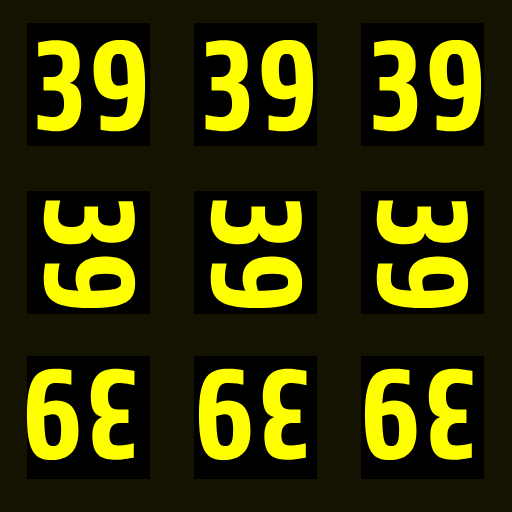
<style>
.page{position:relative;width:512px;height:512px;background:#141301}
.page>*{position:absolute;margin:0}
.t1{font:130px "Share-BoldOSF";color:#ffff00}
</style>
<div class="page">
<p class="t1" style="left:37px;top:39px;width:109px;height:93px">39</p>
<p class="t1" style="left:205px;top:39px;width:109px;height:93px">39</p>
<p class="t1" style="left:373px;top:39px;width:109px;height:93px">39</p>
<p class="t1" style="left:43px;top:200px;width:93px;height:109px;rotate:90deg">39</p>
<p class="t1" style="left:210px;top:200px;width:93px;height:109px;rotate:90deg">39</p>
<p class="t1" style="left:376px;top:200px;width:93px;height:109px;rotate:90deg">39</p>
<p class="t1" style="left:26px;top:368px;width:109px;height:93px;rotate:-180deg">39</p>
<p class="t1" style="left:198px;top:368px;width:109px;height:93px;rotate:-180deg">39</p>
<p class="t1" style="left:364px;top:368px;width:109px;height:93px;rotate:-180deg">39</p>
</div>
